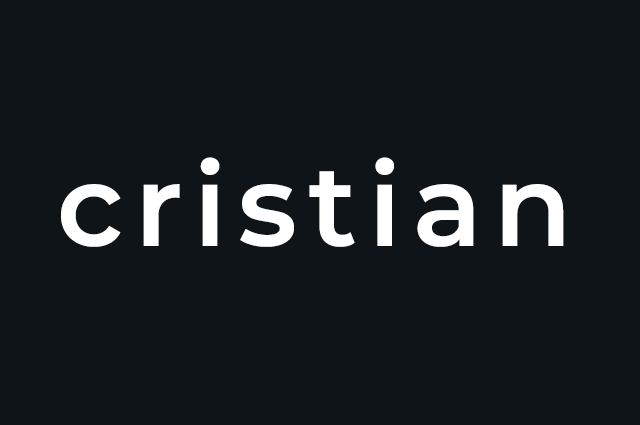
<style>
.page{position:relative;width:640px;height:425px;background:#0f1419}
.page>*{position:absolute;margin:0}
.t1{font:114.3px "Montserrat-SemiBold";letter-spacing:0.1em;color:#ffffff}
</style>
<div class="page">
<p class="t1" style="left:61px;top:157px;width:503px;height:90px">cristian</p>
</div>
